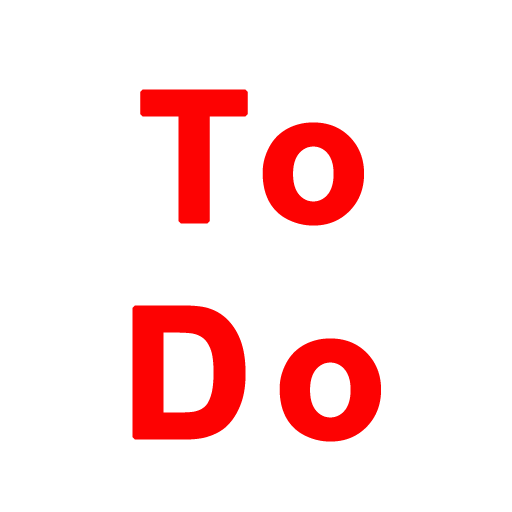
<style>
.page{position:relative;width:512px;height:512px;background:#ffffff}
.page>*{position:absolute;margin:0}
.t1{font:180px "Arial-BoldMT";letter-spacing:0.1em;color:#fd0202;font-weight:bold}
</style>
<div class="page">
<p class="t1" style="left:132px;top:89px;width:249px;height:353px;text-align:center">To<br>Do</p>
</div>
